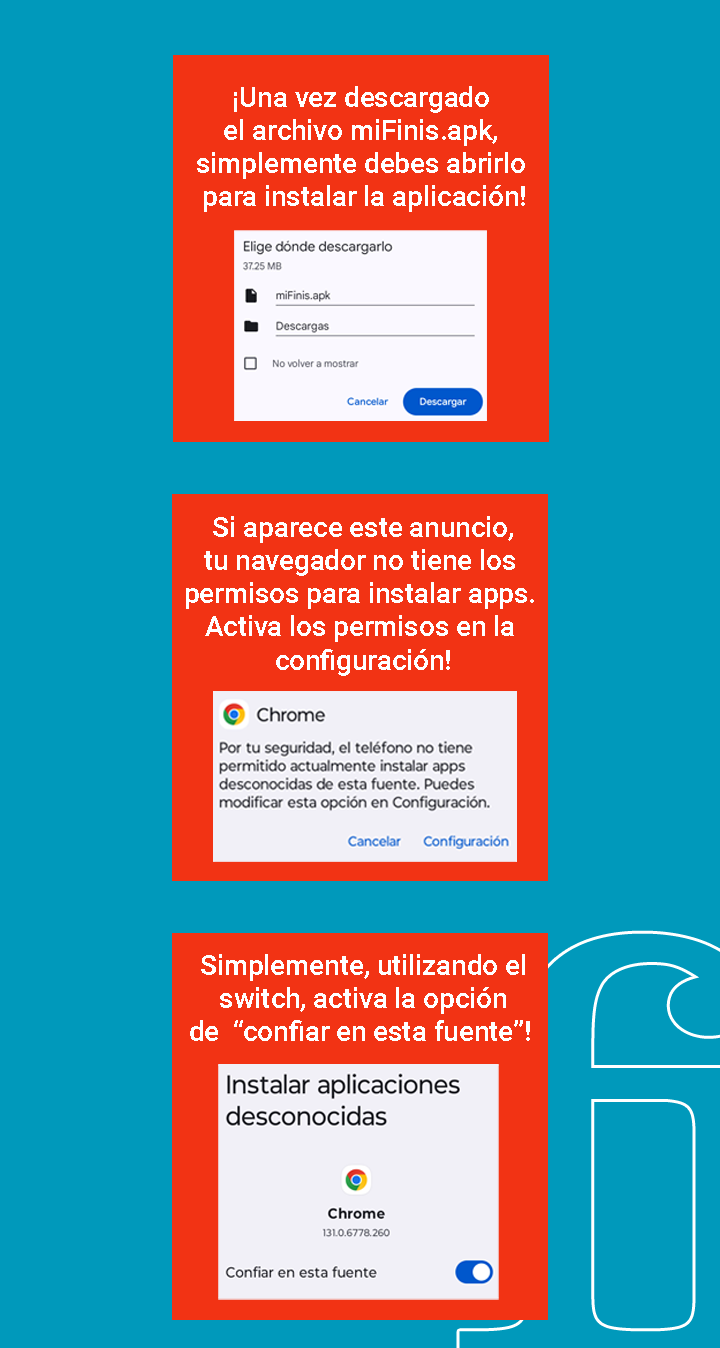
<style>
.page{position:relative;width:720px;height:1348px;background:#0099bb}
.page>*{position:absolute;margin:0}
.t1{font:27.7px "Roboto-Medium";color:#ffffff}
</style>
<div class="page">
<p class="t1" style="left:197px;top:86px;width:328px;height:126px;text-align:center">¡Una vez descargado <br>el archivo miFinis.apk, <br>simplemente debes abrirlo <br>para instalar la aplicación!</p>
<p class="t1" style="left:186px;top:516px;width:348px;height:160px;text-align:center">Si aparece este anuncio,<br>tu navegador no tiene los <br>permisos para instalar apps. <br>Activa los permisos en la <br>configuración!</p>
<p class="t1" style="left:190px;top:954px;width:340px;height:87px;text-align:center">Simplemente, utilizando el<br>switch, activa la opción<br>de  “confiar en esta fuente”!</p>
</div>
